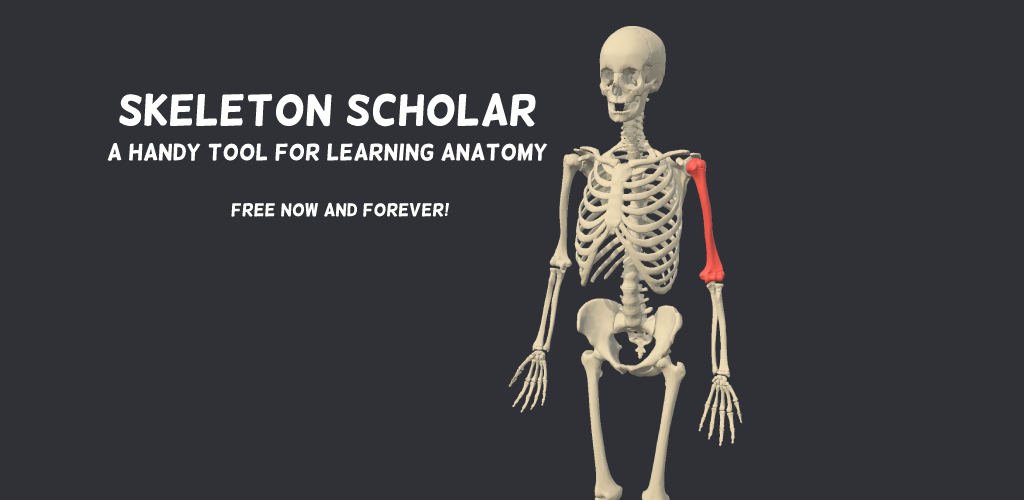
<style>
.page{position:relative;width:1024px;height:500px;background:#303136}
.page>*{position:absolute;margin:0}
.t1{font:43.3px "Helsinki";color:#ffffff}
.t2{font:23px "Helsinki";color:#ffffff}
.t3{font:18px "Helsinki";color:#ffffff}
</style>
<div class="page">
<p class="t1" style="left:118px;top:92px;width:419px;height:36px">Skeleton Scholar</p>
<p class="t2" style="left:107px;top:142px;width:441px;height:20px">A handy tool for learning anatomy</p>
<p class="t3" style="left:231px;top:202px;width:219px;height:16px">free now and forever!</p>
</div>
